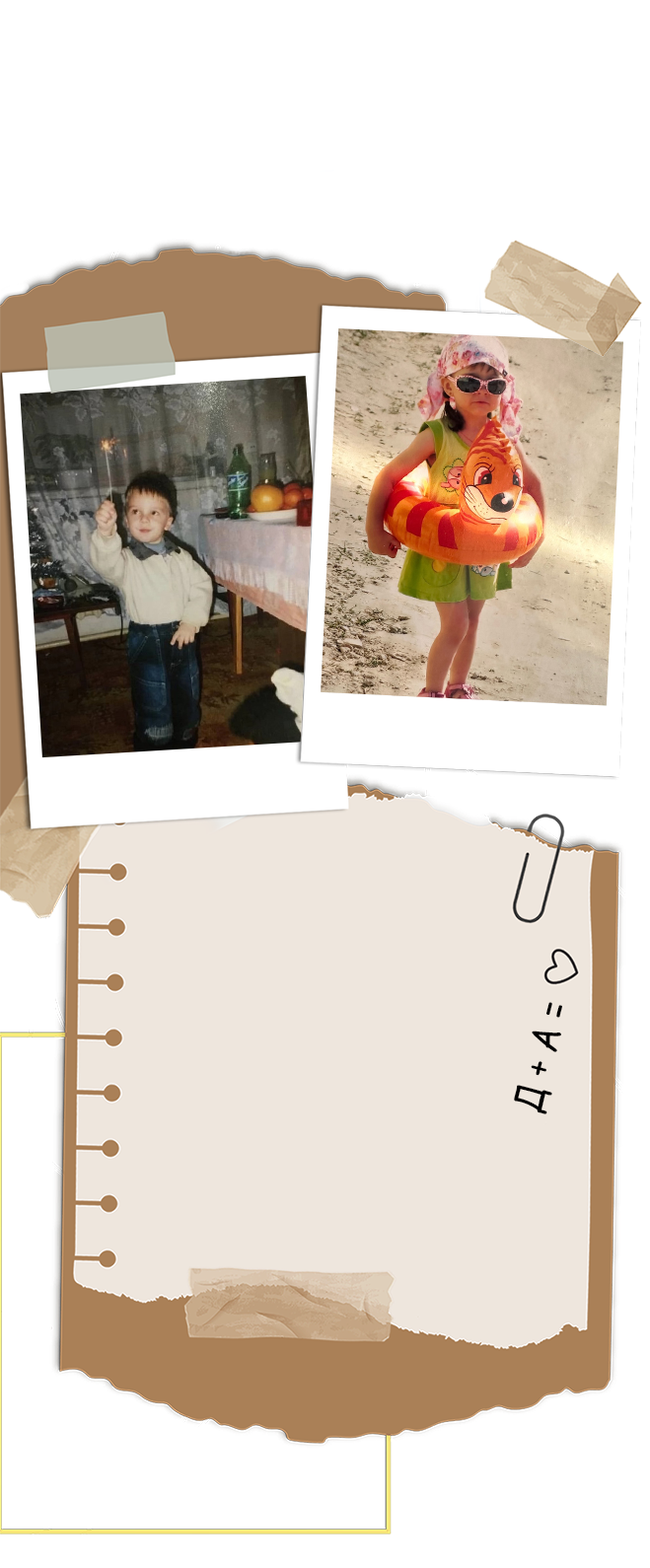
<style>
.page{position:relative;width:650px;height:1568px;background:#ffffff}
.page>*{position:absolute;margin:0}
.t1{font:39.1px "ComicSansMS";color:#000000;scale:0.86 1}
</style>
<div class="page">
<p class="t1" style="left:514px;top:1002px;width:48px;height:112px;rotate:-75deg">Д + А =</p>
</div>
